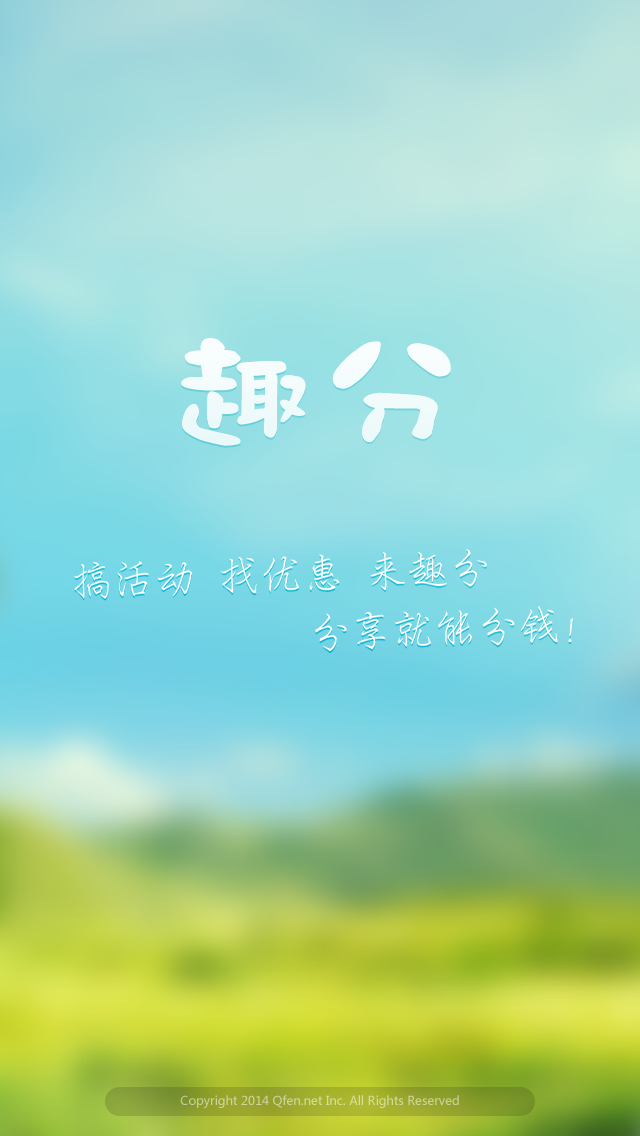
<style>
.page{position:relative;width:640px;height:1136px}
.page>*{position:absolute;margin:0}
.t1{font:150px "DFMo-W9-WINP-BF";color:#ffffff}
.t2{font:42px "HYi2gj";color:#ffffff}
.t3{font:12px "MicrosoftYaHei";color:#d0d69d}
</style>
<div class="page">
<p class="t1" style="left:181px;top:338px;width:270px;height:108px">趣分</p>
<p class="t2" style="left:74px;top:549px;width:413px;height:50px;rotate:-2deg">搞活动 找优惠 来趣分</p>
<p class="t2" style="left:315px;top:606px;width:258px;height:45px;rotate:-2deg">分享就能分钱!</p>
<p class="t3" style="left:180px;top:1095px;width:279px;height:13px">Copyright 2014 Qfen.net Inc. All Rights Reserved</p>
</div>
